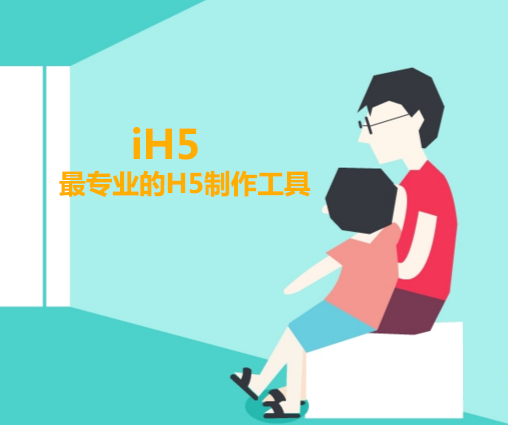
<style>
.page{position:relative;width:508px;height:425px;background:#a9f0ec}
.page>*{position:absolute;margin:0}
.t1{font:40px "MicrosoftYaHei-Bold";color:#ffae00}
.t2{font:24px "MicrosoftYaHei-Bold";color:#ffae00}
.t3{font:26.7px "MicrosoftYaHei-Bold";color:#ffae00}
</style>
<div class="page">
<p class="t1" style="left:133px;top:127px;width:65px;height:33px"><span class="t2">     </span>iH5</p>
<p class="t3" style="left:59px;top:170px;width:252px;height:27px">最专业的H5制作工具</p>
</div>
